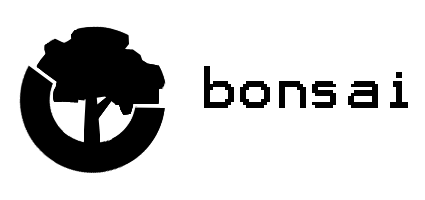
<style>
.page{position:relative;width:425px;height:200px;background:#ffffff}
.page>*{position:absolute;margin:0}
.t1{font:48px "Terminal";color:#000000}
</style>
<div class="page">
<p class="t1" style="left:204px;top:66px;width:204px;height:42px">bonsai</p>
</div>
